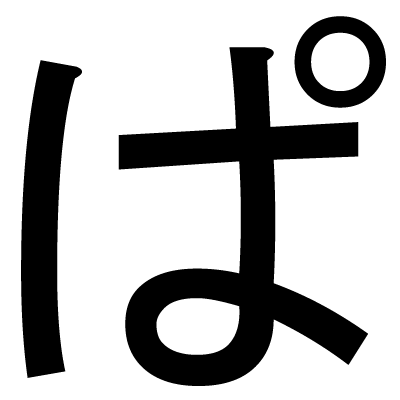
<style>
.page{position:relative;width:400px;height:400px;background:#ffffff}
.page>*{position:absolute;margin:0}
.t1{font:416.7px "MS-PGothic";color:#000000}
</style>
<div class="page">
<p class="t1" style="left:21px;top:16px;width:365px;height:370px">ぱ</p>
</div>
